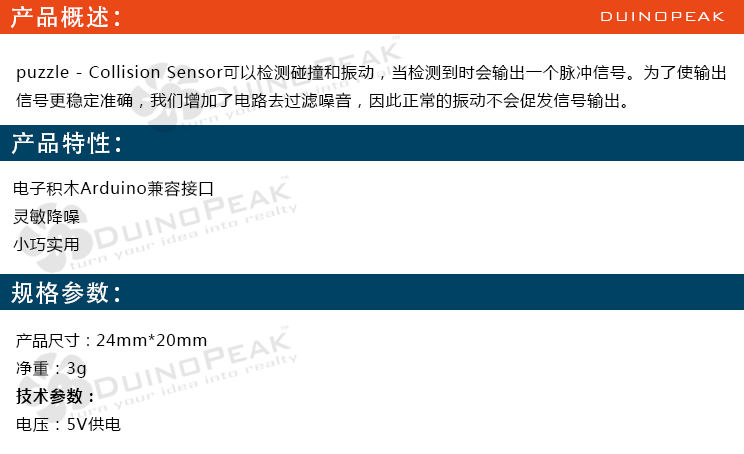
<style>
.page{position:relative;width:744px;height:454px;background:#ffffff}
.page>*{position:absolute;margin:0}
.t1{font:24px "AdobeHeitiStd-Regular";letter-spacing:0.05em;color:#ffffff}
.t2{font:18px "BankGothicBT-Light";letter-spacing:0.05em;color:#ffffff}
.t3{font:16px "MicrosoftYaHei";letter-spacing:0.05em;color:#000000}
.t4{font:16px "MicrosoftYaHei";color:#000000}
.t5{font:16px "MicrosoftYaHei-Bold";letter-spacing:0.05em;color:#000000}
</style>
<div class="page">
<p class="t1" style="left:10px;top:6px;width:109px;height:23px">产品概述：</p>
<p class="t2" style="left:601px;top:12px;width:124px;height:9px">DUINOPEAK</p>
<p class="t3" style="left:16px;top:64px;width:710px;height:45px">puzzle - Collision Sensor可以检测碰撞和振动，当检测到时会输出一个脉冲信号。为了使输出<br>信号更稳定准确，我们增加了电路去过滤噪音，因此正常的振动不会促发信号输出。</p>
<p class="t1" style="left:11px;top:131px;width:109px;height:24px">产品特性：</p>
<p class="t3" style="left:13px;top:180px;width:200px;height:73px">电子积木Arduino兼容接口<br>灵敏降噪<br>小巧实用</p>
<p class="t1" style="left:11px;top:281px;width:108px;height:23px">规格参数：</p>
<p class="t3" style="left:16px;top:333px;width:191px;height:99px"><span class="t4">产品尺寸：</span>24mm*20mm<br>净重：3g<br><span class="t5">技术参数：<br></span>电压：5V供电</p>
</div>
